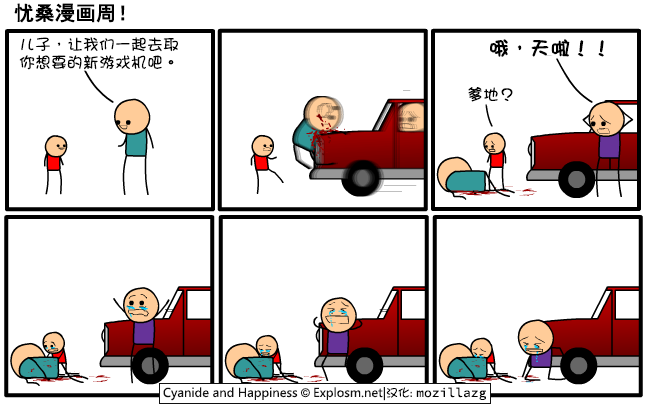
<style>
.page{position:relative;width:650px;height:410px;background:#ffffff}
.page>*{position:absolute;margin:0}
.t1{font:20px "SimHei";color:#000000;font-weight:bold}
.t2{font:16px/18px "DFGirl";color:#000000}
.t3{font:20px "DFGirl";color:#000000;font-weight:bold}
.t4{font:16px "DFGirl";color:#000000}
</style>
<div class="page">
<p class="t1" style="left:14px;top:3px;width:111px;height:20px">忧桑漫画周！</p>
<p class="t2" style="left:19px;top:37px;width:159px;height:33px">儿子，让我们一起去取<br>你想要的新游戏机吧。</p>
<p class="t3" style="left:490px;top:39px;width:114px;height:18px">哦，天啦！！</p>
<p class="t4" style="left:468px;top:87px;width:45px;height:15px">爹地？</p>
</div>
